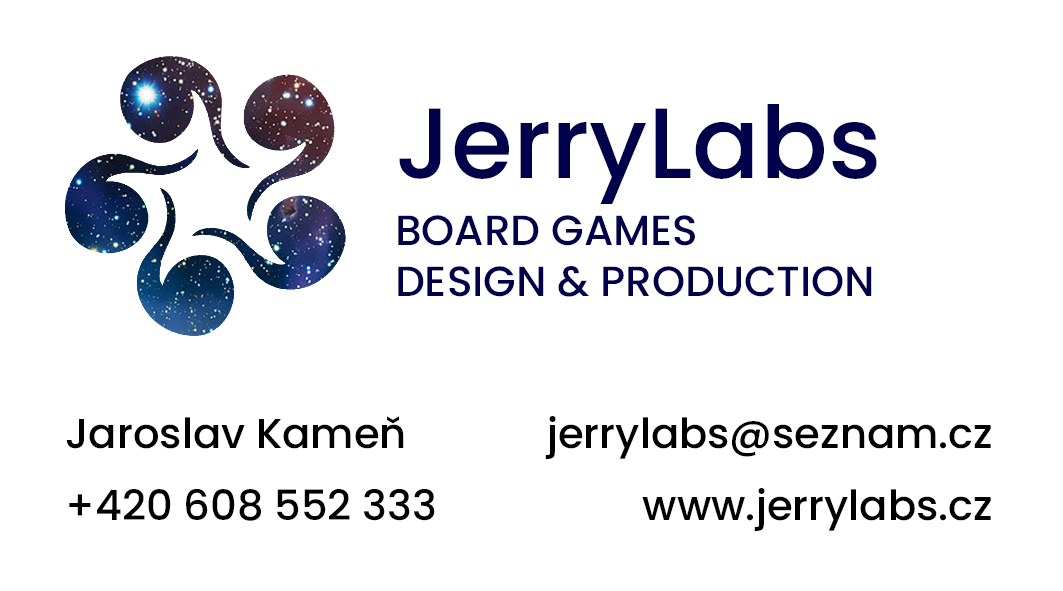
<style>
.page{position:relative;width:1063px;height:591px;background:#ffffff}
.page>*{position:absolute;margin:0}
.t1{font:100px "Poppins-Medium";color:#00004b}
.t2{font:42.2px "Poppins-Medium";color:#00004b}
.t3{font:41.7px/72.3px "Poppins-Medium";color:#000000}
.t4{font:43.4px/72.3px "Poppins-SemiBold";color:#000000}
</style>
<div class="page">
<p class="t1" style="left:399px;top:104px;width:478px;height:100px">JerryLabs</p>
<p class="t2" style="left:398px;top:215px;width:474px;height:82px">BOARD GAMES <br>DESIGN &amp; PRODUCTION</p>
<p class="t3" style="left:66px;top:416px;width:925px;height:115px">Jaroslav Kameň            jerrylabs@seznam.cz<br>+420 608 552 333                   www.jerrylabs.cz<br><span class="t4"><br>www.jerrylabs.cz</span></p>
</div>
